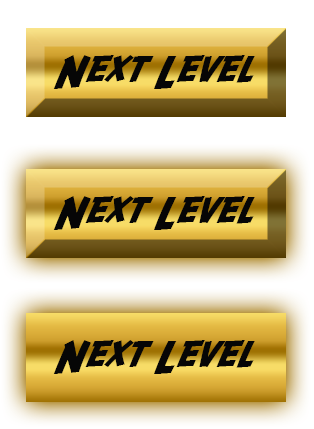
<style>
.page{position:relative;width:314px;height:429px}
.page>*{position:absolute;margin:0}
.t1{font:36.9px "SFFedora";letter-spacing:-0.005em;color:#060606;scale:1.05 1}
</style>
<div class="page">
<p class="t1" style="left:53px;top:55px;width:202px;height:34px">Next Level</p>
<p class="t1" style="left:53px;top:196px;width:202px;height:34px">Next Level</p>
<p class="t1" style="left:53px;top:340px;width:202px;height:34px">Next Level</p>
</div>
